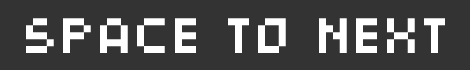
<style>
.page{position:relative;width:470px;height:70px;background:#333333}
.page>*{position:absolute;margin:0}
.t1{font:41.7px "SNchibi_6";letter-spacing:0.06em;color:#ffffff;text-transform:uppercase}
</style>
<div class="page">
<p class="t1" style="left:26px;top:18px;width:419px;height:35px">space to next</p>
</div>
